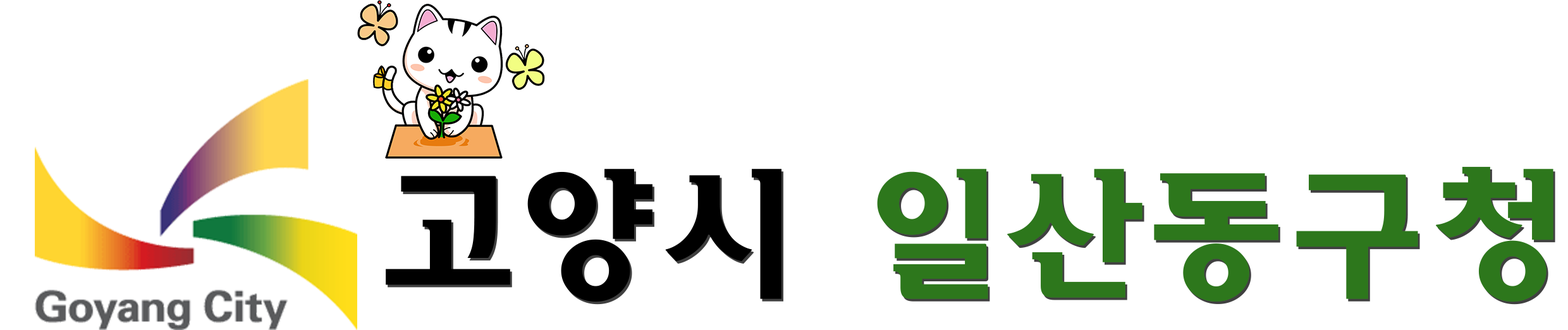
<style>
.page{position:relative;width:1568px;height:330px;background:#ffffff}
.page>*{position:absolute;margin:0}
.t1{font:141.1px "HaanSomangB";color:#2d771c}
.t2{font:141.1px "HaanSomangB";color:#000000}
</style>
<div class="page">
<p class="t1" style="left:386px;top:166px;width:1167px;height:136px"><span class="t2">고양시 </span>일산동구청</p>
</div>
